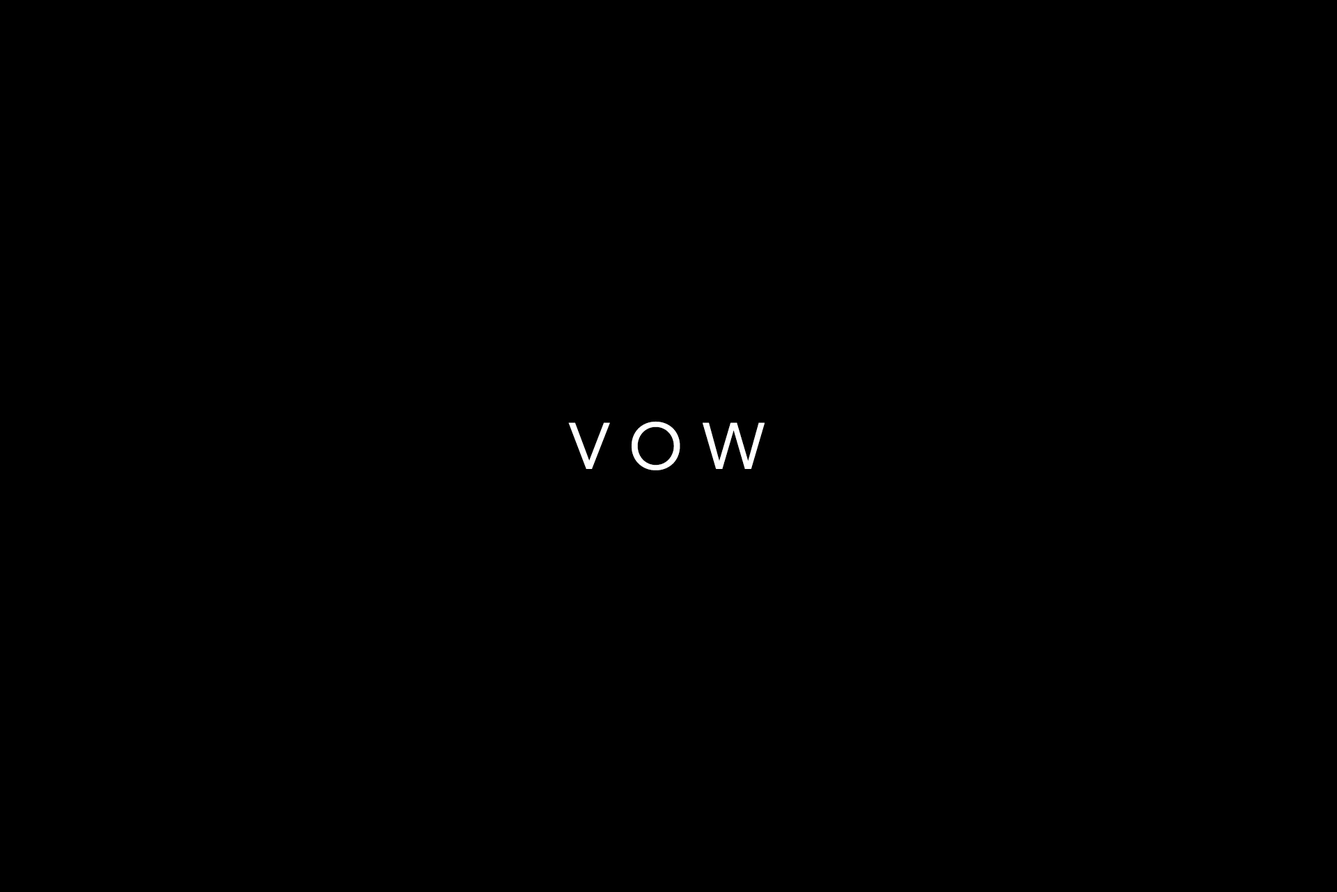
<style>
.page{position:relative;width:1337px;height:892px;background:#000000}
.page>*{position:absolute;margin:0}
.t1{font:65px "Avenir-Roman";letter-spacing:0.3em;color:#ffffff;text-transform:uppercase}
</style>
<div class="page">
<p class="t1" style="left:568px;top:421px;width:197px;height:49px">VOW</p>
</div>
